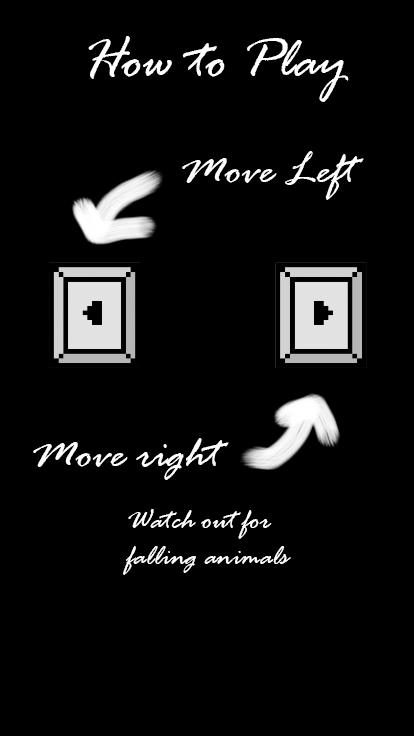
<style>
.page{position:relative;width:414px;height:736px;background:#000000}
.page>*{position:absolute;margin:0}
.t1{font:59.3px "RageItalic";color:#ffffff}
.t2{font:47.4px "RageItalic";color:#ffffff}
.t3{font:29.6px "RageItalic";color:#ffffff}
</style>
<div class="page">
<p class="t1" style="left:88px;top:36px;width:261px;height:66px">How to Play</p>
<p class="t2" style="left:182px;top:151px;width:182px;height:49px">Move Left</p>
<p class="t2" style="left:33px;top:438px;width:196px;height:42px">Move right</p>
<p class="t3" style="left:123px;top:509px;width:168px;height:66px">Watch out for <br>falling animals</p>
</div>
